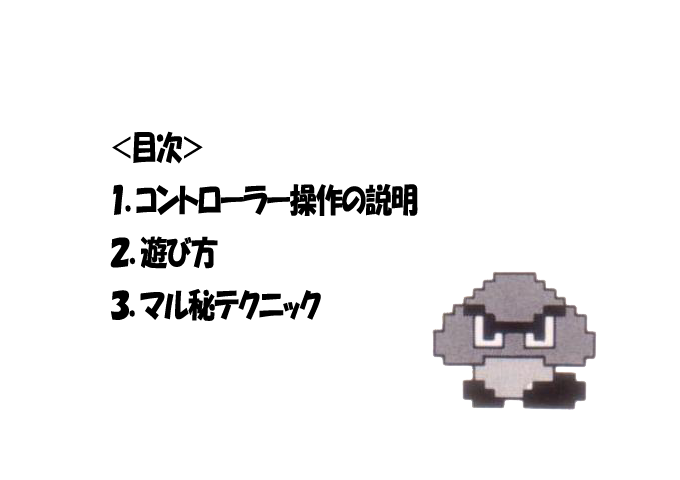
<style>
.page{position:relative;width:680px;height:480px;background:#ffffff}
.page>*{position:absolute;margin:0}
.t1{font:33px "HGPSoeiKakupoptai";letter-spacing:-0.015em;color:#000000;scale:0.82 1}
</style>
<div class="page">
<p class="t1" style="left:110px;top:131px;width:308px;height:190px">＜目次＞<br>           １．コントローラー操作の説明<br>           ２．遊び方<br>           ３．マル秘テクニック</p>
</div>
